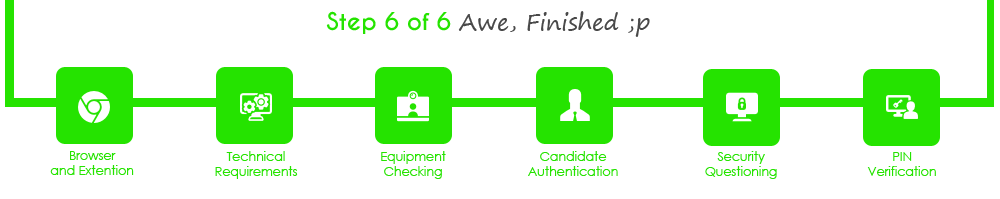
<style>
.page{position:relative;width:1000px;height:199px;background:#ffffff}
.page>*{position:absolute;margin:0}
.t1{font:22.9px "SegoePrint";color:#494949}
.t2{font:22.9px "CaviarDreams-Bold";color:#25e300}
.t3{font:12.5px "CenturyGothic";color:#25e300}
</style>
<div class="page">
<p class="t1" style="left:326px;top:11px;width:324px;height:26px"><span class="t2">Step 6 of 6 </span>Awe, Finished ;p</p>
<p class="t3" style="left:50px;top:151px;width:84px;height:24px;text-align:center">Browser<br>and Extention</p>
<p class="t3" style="left:215px;top:151px;width:83px;height:28px;text-align:center">Technical<br>Requirements</p>
<p class="t3" style="left:381px;top:151px;width:65px;height:28px;text-align:center">Equipment<br>Checking</p>
<p class="t3" style="left:528px;top:151px;width:90px;height:25px;text-align:center">Candidate<br>Authentication</p>
<p class="t3" style="left:705px;top:151px;width:72px;height:28px;text-align:center">Security<br>Questioning</p>
<p class="t3" style="left:867px;top:152px;width:69px;height:24px;text-align:center">PIN<br>Verification</p>
</div>
